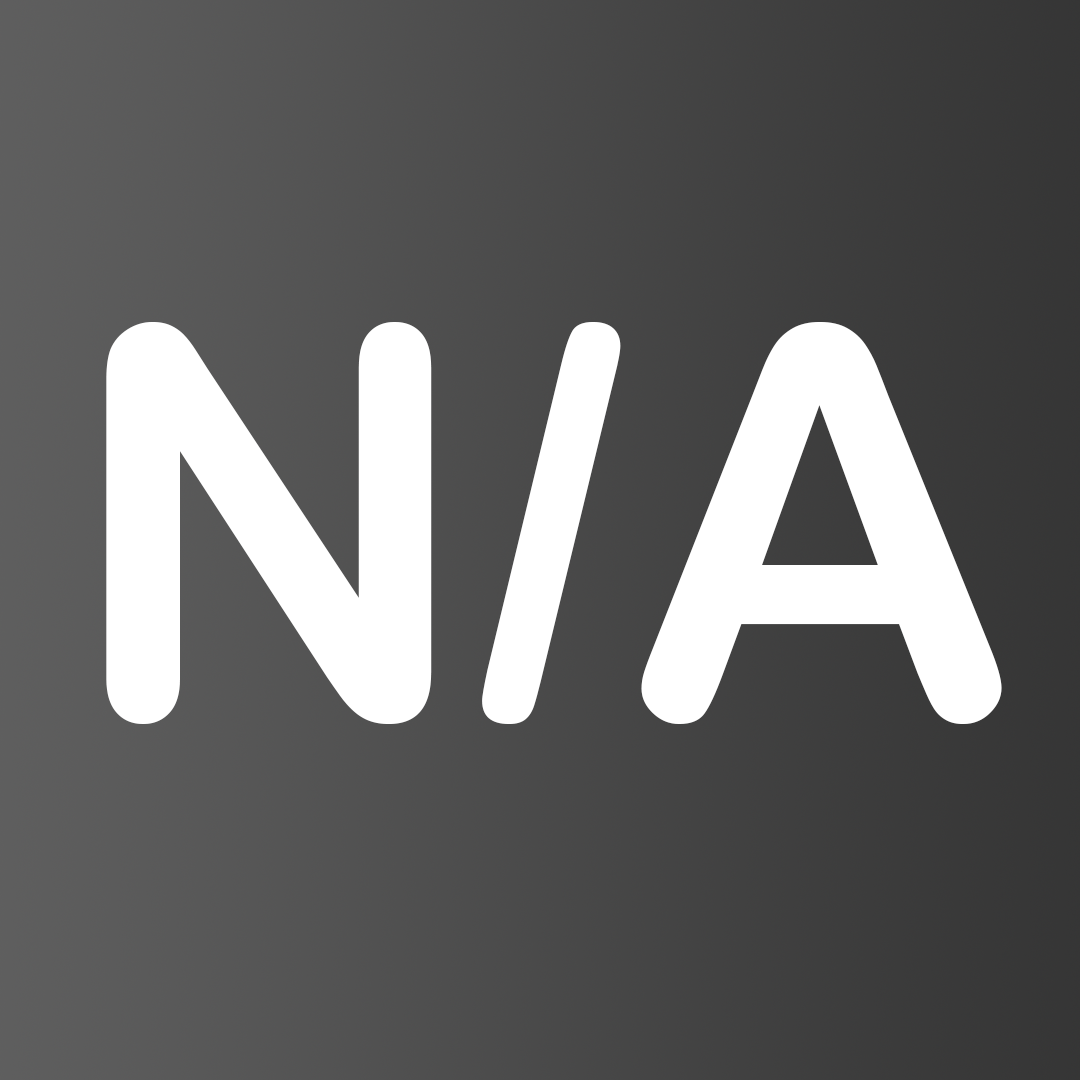
<style>
.page{position:relative;width:1080px;height:1080px}
.page>*{position:absolute;margin:0}
.t1{font:541.7px "ArialRoundedMTBold";color:#ffffff}
</style>
<div class="page">
<p class="t1" style="left:106px;top:322px;width:896px;height:402px">N/A</p>
</div>
